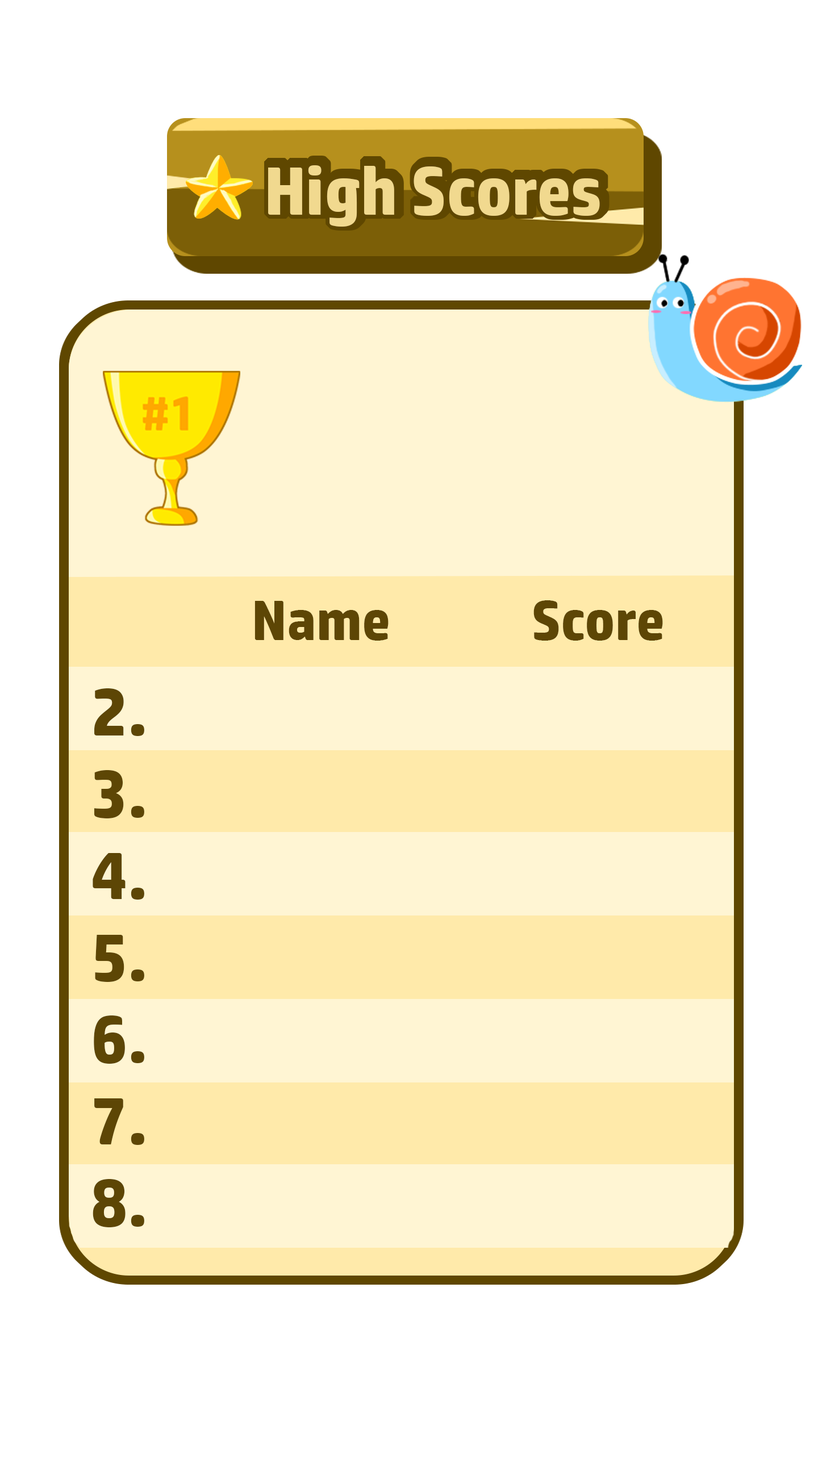
<style>
.page{position:relative;width:818px;height:1459px;background:#ffffff}
.page>*{position:absolute;margin:0}
.t1{font:56.8px "HPSimplified-Bold";color:#5d4605}
.t2{font:68.1px "HPSimplified-Bold";color:#5d4605}
</style>
<div class="page">
<p class="t1" style="left:254px;top:600px;width:409px;height:40px">Name             Score</p>
<p class="t2" style="left:93px;top:688px;width:51px;height:539px;text-align:center">2.<br>3.<br>4.<br>5.<br>6.<br>7.<br>8.</p>
</div>
